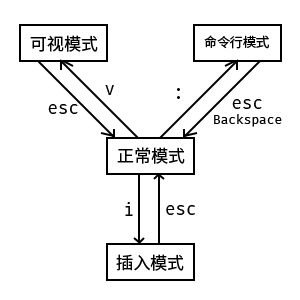
<style>
.page{position:relative;width:300px;height:300px;background:#ffffff}
.page>*{position:absolute;margin:0}
.t1{font:17px "SourceHanSansHWSC-Regular";color:#000000}
.t2{font:13px "SourceHanSansHWSC-Regular";color:#000000}
.t3{font:17px "FiraCode-Regular";color:#000000}
.t4{font:17px "AdobeHeitiStd-Regular";color:#000000}
.t5{font:12.5px "FiraCode-Regular";color:#000000}
</style>
<div class="page">
<p class="t1" style="left:30px;top:35px;width:68px;height:17px">可视模式</p>
<p class="t2" style="left:204px;top:35px;width:65px;height:14px">命令行模式</p>
<p class="t3" style="left:105px;top:85px;width:9px;height:10px">v</p>
<p class="t4" style="left:177px;top:88px;width:3px;height:11px">：</p>
<p class="t3" style="left:232px;top:99px;width:30px;height:10px">esc</p>
<p class="t3" style="left:48px;top:104px;width:30px;height:10px">esc</p>
<p class="t5" style="left:214px;top:114px;width:68px;height:13px">Backspace</p>
<p class="t1" style="left:117px;top:147px;width:68px;height:17px">正常模式</p>
<p class="t3" style="left:125px;top:202px;width:8px;height:14px">i</p>
<p class="t3" style="left:166px;top:205px;width:29px;height:10px">esc</p>
<p class="t1" style="left:116px;top:254px;width:68px;height:17px">插入模式</p>
</div>
